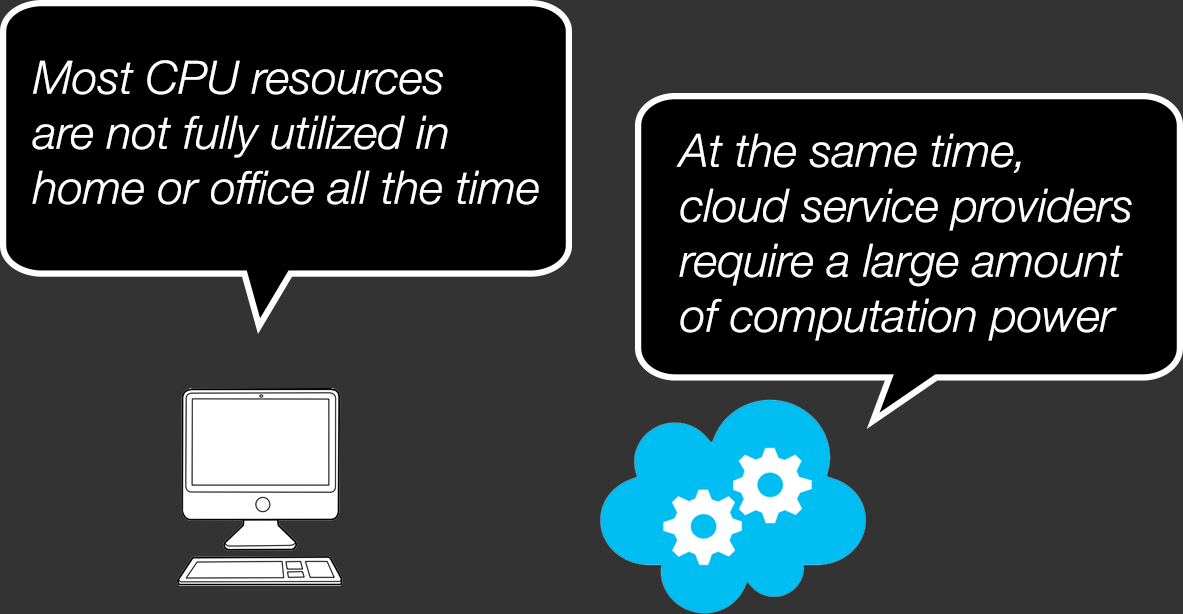
<style>
.page{position:relative;width:1183px;height:614px;background:#333333}
.page>*{position:absolute;margin:0}
.t1{font:45.8px "HelveticaNeue-LightItalic";color:#ffffff}
</style>
<div class="page">
<p class="t1" style="left:32px;top:60px;width:507px;height:145px">Most CPU resources <br>are not fully utilized in home or office all the time</p>
<p class="t1" style="left:676px;top:133px;width:456px;height:208px">At the same time, <br>cloud service providers require a large amount of computation power</p>
</div>
